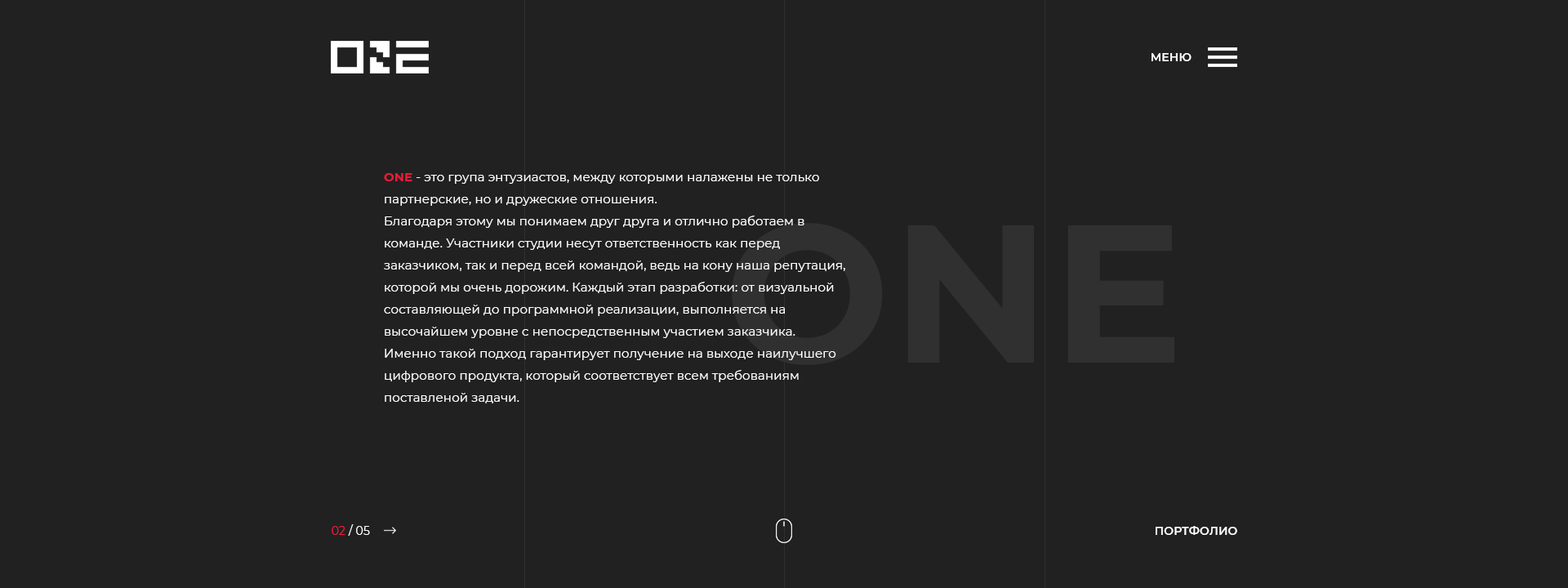
<style>
.page{position:relative;width:1568px;height:588px;background:#212121}
.page>*{position:absolute;margin:0}
.t1{font:11.4px "Montserrat-SemiBold";letter-spacing:0.01em;color:#ffffff}
.t2{font:12.2px/22.1px "Montserrat-Regular";letter-spacing:0.01em;color:#ffffff}
.t3{font:12.2px/22.1px "Montserrat-Bold";letter-spacing:0.01em;color:#e91b38}
.t4{font:11.4px "Montserrat-Regular";letter-spacing:0.01em;color:#ffffff}
.t5{font:11.4px "Montserrat-Regular";letter-spacing:0.01em;color:#e91b38}
</style>
<div class="page">
<p class="t1" style="left:1152px;top:53px;width:40px;height:8px">МЕНЮ</p>
<p class="t2" style="left:384px;top:173px;width:461px;height:230px"><span class="t3">ONE</span> - это група энтузиастов, между которыми налажены не только партнерские, но и дружеские отношения.<br>Благодаря этому мы понимаем друг друга и отлично работаем в команде. Участники студии несут ответственность как перед заказчиком, так и перед всей командой, ведь на кону наша репутация, которой мы очень дорожим. Каждый этап разработки: от визуальной составляющей до программной реализации, выполняется на высочайшем уровне с непосредственным участием заказчика. Именно такой подход гарантирует получение на выходе наилучшего цифрового продукта, который соответствует всем требованиям поставленой задачи.</p>
<p class="t4" style="left:332px;top:524px;width:38px;height:12px"><span class="t5">02</span> / 05</p>
<p class="t1" style="left:1156px;top:526px;width:81px;height:9px">ПОРТФОЛИО</p>
</div>
